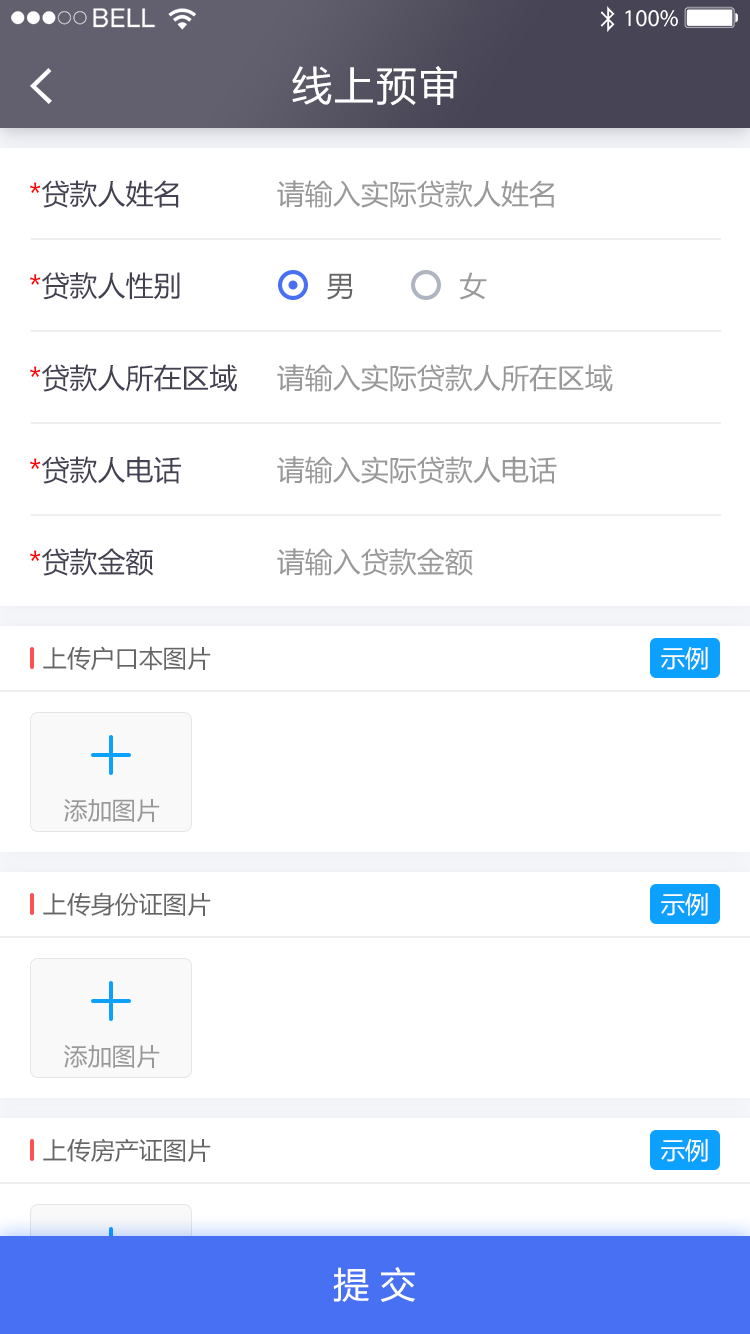
<style>
.page{position:relative;width:750px;height:1334px;background:#ffffff}
.page>*{position:absolute;margin:0}
.t1{font:40px "MicrosoftYaHei";letter-spacing:0.06em;color:#ffffff}
.t2{font:28px "MicrosoftYaHei";color:#444152}
.t3{font:28px "MicrosoftYaHei";color:#ff0000}
.t4{font:28px "MicrosoftYaHei";color:#999999}
.t5{font:28.1px "MicrosoftYaHei";color:#444152}
.t6{font:28.1px "MicrosoftYaHei";color:#ff0000}
.t7{font:28px "MicrosoftYaHei";color:#666666}
.t8{font:28.1px "MicrosoftYaHei";color:#ff0003}
.t9{font:28.1px "MicrosoftYaHei";color:#999999}
.t10{font:24px "MicrosoftYaHei";color:#666666}
.t11{font:24px "MicrosoftYaHei";color:#ffffff}
.t12{font:24px "MicrosoftYaHei";color:#999999}
.t13{font:36px "MicrosoftYaHei";color:#ffffff}
</style>
<div class="page">
<p class="t1" style="left:292px;top:66px;width:165px;height:40px">线上预审</p>
<p class="t2" style="left:30px;top:180px;width:149px;height:28px"><span class="t3">*</span>贷款人姓名</p>
<p class="t4" style="left:277px;top:180px;width:277px;height:28px">请输入实际贷款人姓名</p>
<p class="t5" style="left:30px;top:272px;width:150px;height:28px"><span class="t6">*</span>贷款人性别</p>
<p class="t7" style="left:327px;top:273px;width:26px;height:27px">男</p>
<p class="t4" style="left:459px;top:272px;width:28px;height:28px">女</p>
<p class="t5" style="left:30px;top:364px;width:207px;height:28px"><span class="t8">*</span>贷款人所在区域</p>
<p class="t9" style="left:277px;top:364px;width:336px;height:28px">请输入实际贷款人所在区域</p>
<p class="t5" style="left:30px;top:456px;width:151px;height:28px"><span class="t6">*</span>贷款人电话</p>
<p class="t9" style="left:277px;top:456px;width:280px;height:28px">请输入实际贷款人电话</p>
<p class="t5" style="left:30px;top:548px;width:124px;height:28px"><span class="t6">*</span>贷款金额</p>
<p class="t9" style="left:277px;top:548px;width:196px;height:28px">请输入贷款金额</p>
<p class="t10" style="left:43px;top:646px;width:168px;height:25px">上传户口本图片</p>
<p class="t11" style="left:661px;top:647px;width:47px;height:23px">示例</p>
<p class="t12" style="left:64px;top:799px;width:96px;height:23px">添加图片</p>
<p class="t10" style="left:43px;top:892px;width:168px;height:24px">上传身份证图片</p>
<p class="t11" style="left:661px;top:893px;width:47px;height:23px">示例</p>
<p class="t12" style="left:64px;top:1045px;width:96px;height:23px">添加图片</p>
<p class="t10" style="left:43px;top:1138px;width:168px;height:24px">上传房产证图片</p>
<p class="t11" style="left:661px;top:1139px;width:47px;height:23px">示例</p>
<p class="t13" style="left:333px;top:1267px;width:82px;height:35px">提 交</p>
</div>
